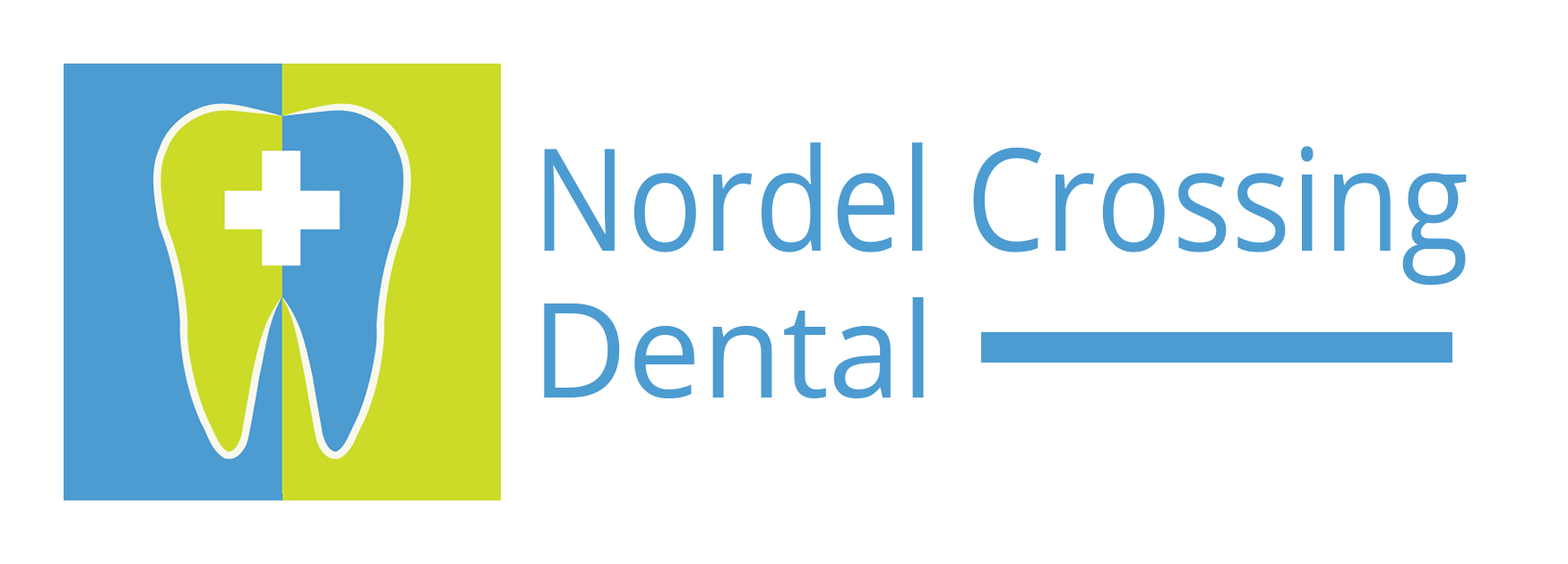
<style>
.page{position:relative;width:1568px;height:564px;background:#ffffff}
.page>*{position:absolute;margin:0}
.t1{font:142.8px "OpenSans";color:#4c9bd1;scale:0.88 1}
.t2{font:131.4px "OpenSans";color:#4c9bd1}
</style>
<div class="page">
<p class="t1" style="left:544px;top:142px;width:923px;height:144px">Nordel Crossing</p>
<p class="t2" style="left:544px;top:297px;width:380px;height:102px">Dental</p>
</div>
